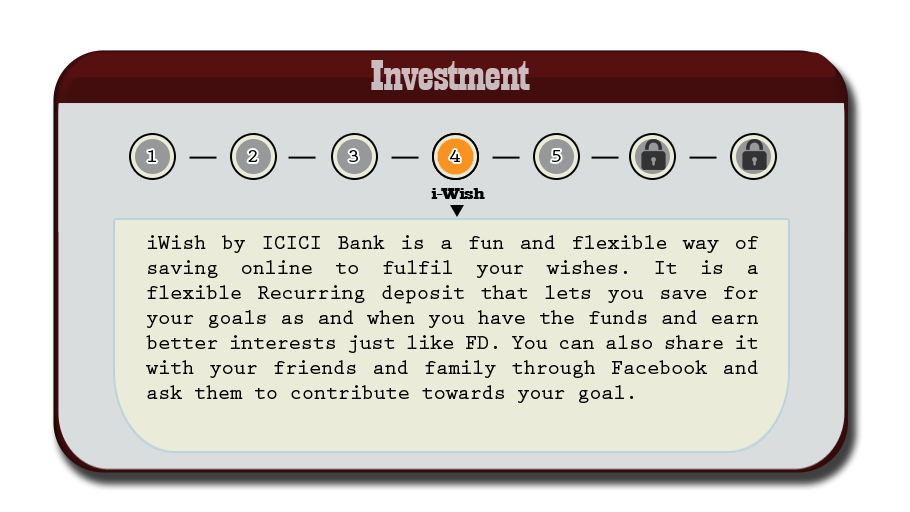
<style>
.page{position:relative;width:910px;height:512px;background:#eaebd8}
.page>*{position:absolute;margin:0}
.t1{font:44.6px "Playbill";letter-spacing:-0.025em;color:#c8bbbe;scale:1.61 1}
.t2{font:18.8px "PrestigeEliteStd-Bd";letter-spacing:-0.025em;color:#020201;scale:1.18 1}
.t3{font:17.3px "Playbill";letter-spacing:-0.025em;color:#020201;scale:2.47 1}
.t4{font:20.8px "PrestigeEliteStd-Bd";letter-spacing:-0.025em;color:#020201}
</style>
<div class="page">
<p class="t1" style="left:371px;top:60px;width:159px;height:30px">Investment</p>
<p class="t2" style="left:148px;top:150px;width:8px;height:12px">1</p>
<p class="t2" style="left:248px;top:150px;width:10px;height:12px">2</p>
<p class="t2" style="left:349px;top:150px;width:9px;height:12px">3</p>
<p class="t2" style="left:449px;top:149px;width:11px;height:13px">4</p>
<p class="t2" style="left:551px;top:150px;width:10px;height:12px">5</p>
<p class="t3" style="left:431px;top:188px;width:54px;height:11px">i-Wish</p>
<p class="t4" style="left:146px;top:235px;width:613px;height:168px;text-align:justify">iWish by ICICI Bank is a fun and flexible way of saving online to fulfil your wishes. It is a flexible Recurring deposit that lets you save for your goals as and when you have the funds and earn better interests just like FD. You can also share it with your friends and family through Facebook and ask them to contribute towards your goal.</p>
</div>
